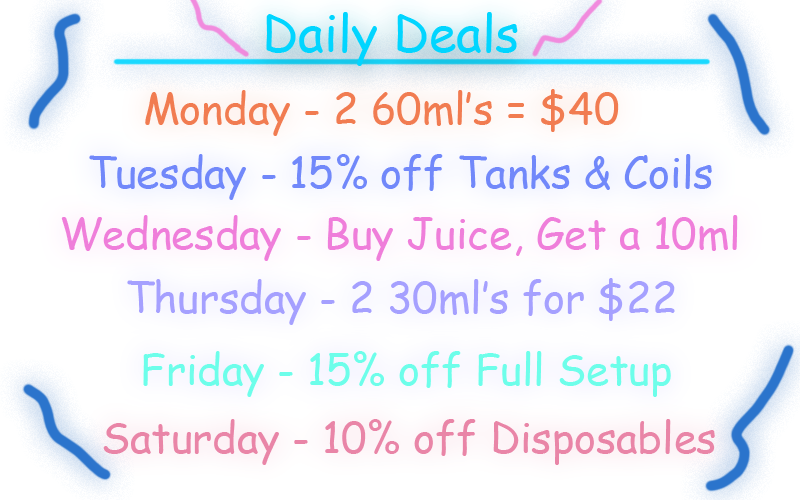
<style>
.page{position:relative;width:800px;height:500px}
.page>*{position:absolute;margin:0}
.t1{font:50px "ComicSansMS";color:#01d5ff}
.t2{font:41.7px "ComicSansMS";color:#f17c51}
.t3{font:41.7px "ComicSansMS";color:#7188fa}
.t4{font:41.7px "ComicSansMS";color:#ef7eda}
.t5{font:41.7px "ComicSansMS";color:#a5a0ff}
.t6{font:41.7px "ComicSansMS";color:#6dfeea}
.t7{font:41.7px "ComicSansMS";color:#e985a7}
</style>
<div class="page">
<p class="t1" style="left:266px;top:12px;width:252px;height:54px">Daily Deals</p>
<p class="t2" style="left:145px;top:89px;width:474px;height:47px">Monday - 2 60ml’s = $40</p>
<p class="t3" style="left:89px;top:154px;width:623px;height:46px">Tuesday - 15% off Tanks &amp; Coils</p>
<p class="t4" style="left:61px;top:215px;width:677px;height:46px">Wednesday - Buy Juice, Get a 10ml</p>
<p class="t5" style="left:127px;top:278px;width:548px;height:47px">Thursday - 2 30ml’s for $22</p>
<p class="t6" style="left:143px;top:351px;width:528px;height:46px">Friday - 15% off Full Setup</p>
<p class="t7" style="left:103px;top:419px;width:612px;height:46px">Saturday - 10% off Disposables</p>
</div>
